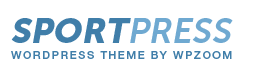
<style>
.page{position:relative;width:260px;height:76px;background:#ffffff}
.page>*{position:absolute;margin:0}
.t1{font:35px "MuseoSans-900";color:#407ea9;text-transform:uppercase;font-style:italic}
.t2{font:35px "MuseoSans-700";color:#6fa9d1;text-transform:uppercase;font-style:italic}
.t3{font:11px "HelveticaNeueLTStd-Md";letter-spacing:0.14em;color:#407ea9;text-transform:uppercase}
</style>
<div class="page">
<p class="t1" style="left:11px;top:18px;width:222px;height:25px">Sport<span class="t2">Press</span></p>
<p class="t3" style="left:11px;top:51px;width:221px;height:8px">wordpress Theme by WPZOOM</p>
</div>
